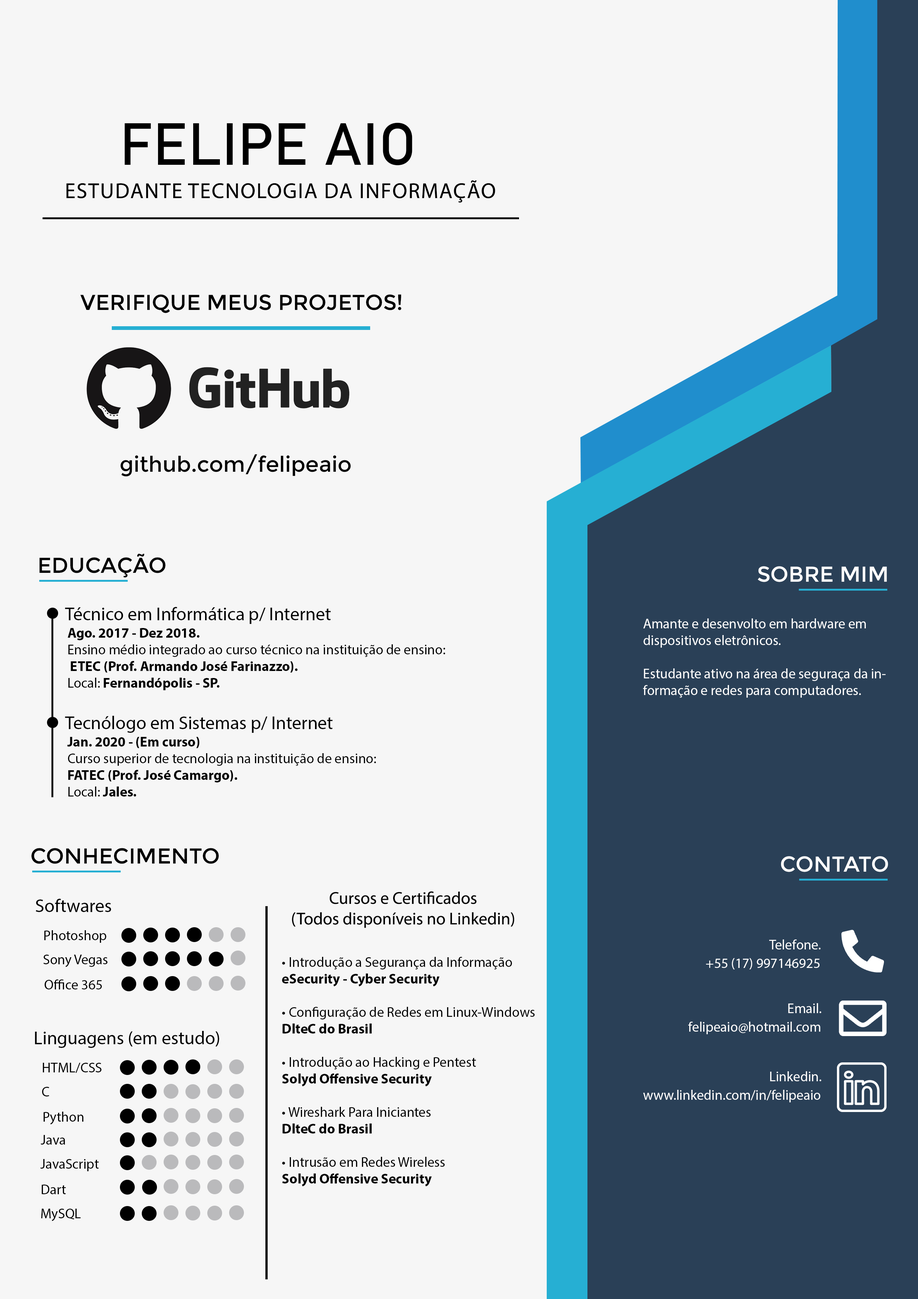
<style>
.page{position:relative;width:918px;height:1299px;background:#f6f6f6}
.page>*{position:absolute;margin:0}
.t1{font:58.6px "Bahnschrift";color:#000000}
.t2{font:21.6px "MyriadPro-Regular";letter-spacing:0.05em;color:#000000}
.t3{font:21.6px "Montserrat-Regular";color:#000000}
.t4{font:21.6px "Montserrat-Regular";color:#ffffff}
.t5{font:18.5px "MyriadPro-Regular";color:#000000}
.t6{font:13.9px "MyriadPro-Regular";color:#000000}
.t7{font:13.9px "MyriadPro-Bold";color:#000000}
.t8{font:13.9px "MyriadPro-Regular";color:#ffffff}
.t9{font:17.2px "MyriadPro-Regular";color:#000000}
</style>
<div class="page">
<p class="t1" style="left:124px;top:123px;width:288px;height:42px">FELIPE AIO</p>
<p class="t2" style="left:66px;top:180px;width:429px;height:23px">ESTUDANTE TECNOLOGIA DA INFORMAÇÃO</p>
<p class="t3" style="left:80px;top:294px;width:321px;height:19px">VERIFIQUE MEUS PROJETOS!</p>
<p class="t3" style="left:120px;top:454px;width:231px;height:22px">github.com/felipeaio</p>
<p class="t3" style="left:39px;top:553px;width:126px;height:25px">EDUCAÇÃO</p>
<p class="t4" style="left:758px;top:566px;width:129px;height:16px">SOBRE MIM</p>
<p class="t5" style="left:65px;top:607px;width:266px;height:17px">Técnico em Informática p/ Internet</p>
<p class="t6" style="left:68px;top:628px;width:377px;height:62px"><span class="t7">Ago. 2017 - Dez 2018.<br></span>Ensino médio integrado ao curso técnico na instituição de ensino:<br> <span class="t7">ETEC (Prof. Armando José Farinazzo).<br></span>Local:<span class="t7"> Fernandópolis - SP.</span></p>
<p class="t8" style="left:643px;top:618px;width:243px;height:79px">Amante e desenvolto em hardware em     dispositivos eletrônicos.<br><br>Estudante ativo na área de seguraça da informação e redes para computadores.</p>
<p class="t5" style="left:65px;top:716px;width:268px;height:17px">Tecnólogo em Sistemas p/ Internet</p>
<p class="t6" style="left:67px;top:737px;width:309px;height:59px"><span class="t7">Jan. 2020 - (Em curso)<br></span>Curso superior de tecnologia na instituição de ensino:<br><span class="t7">FATEC (Prof. José Camargo).<br></span>Local:<span class="t7"> Jales.<br><br>(Em curso)</span></p>
<p class="t3" style="left:31px;top:848px;width:188px;height:16px">CONHECIMENTO</p>
<p class="t4" style="left:781px;top:856px;width:107px;height:16px">CONTATO</p>
<p class="t9" style="left:292px;top:891px;width:222px;height:37px;text-align:center">Cursos e Certificados<br>(Todos disponíveis no Linkedin)</p>
<p class="t5" style="left:36px;top:899px;width:75px;height:13px">Softwares</p>
<p class="t6" style="left:44px;top:930px;width:62px;height:13px">Photoshop</p>
<p class="t8" style="left:769px;top:939px;width:52px;height:10px">Telefone.</p>
<p class="t6" style="left:43px;top:954px;width:65px;height:13px">Sony Vegas</p>
<p class="t6" style="left:282px;top:957px;width:253px;height:229px">• Introdução a Segurança da Informação<br><span class="t7">eSecurity - Cyber Security<br></span><br>• Configuração de Redes em Linux-Windows<br><span class="t7">DlteC do Brasil<br></span><br>• Introdução ao Hacking e Pentest<br><span class="t7">Solyd Offensive Security<br></span><br>• Wireshark Para Iniciantes<br><span class="t7">DlteC do Brasil<br></span><br>• Intrusão em Redes Wireless<br><span class="t7">Solyd Offensive Security</span></p>
<p class="t8" style="left:706px;top:958px;width:114px;height:11px">+55 (17) 997146925</p>
<p class="t6" style="left:44px;top:979px;width:58px;height:10px">Office 365</p>
<p class="t8" style="left:788px;top:1003px;width:34px;height:10px">Email.</p>
<p class="t8" style="left:688px;top:1021px;width:132px;height:13px">felipeaio@hotmail.com</p>
<p class="t5" style="left:35px;top:1031px;width:184px;height:17px">Linguagens (em estudo)</p>
<p class="t6" style="left:43px;top:1063px;width:58px;height:10px">HTML/CSS</p>
<p class="t8" style="left:770px;top:1071px;width:52px;height:10px">Linkedin.</p>
<p class="t6" style="left:42px;top:1087px;width:7px;height:9px">C</p>
<p class="t8" style="left:643px;top:1090px;width:177px;height:12px">www.linkedin.com/in/felipeaio</p>
<p class="t6" style="left:43px;top:1111px;width:41px;height:13px">Python</p>
<p class="t6" style="left:41px;top:1135px;width:24px;height:9px">Java</p>
<p class="t6" style="left:40px;top:1159px;width:59px;height:12px">JavaScript</p>
<p class="t6" style="left:41px;top:1184px;width:25px;height:10px">Dart</p>
<p class="t6" style="left:41px;top:1208px;width:40px;height:13px">MySQL</p>
</div>
